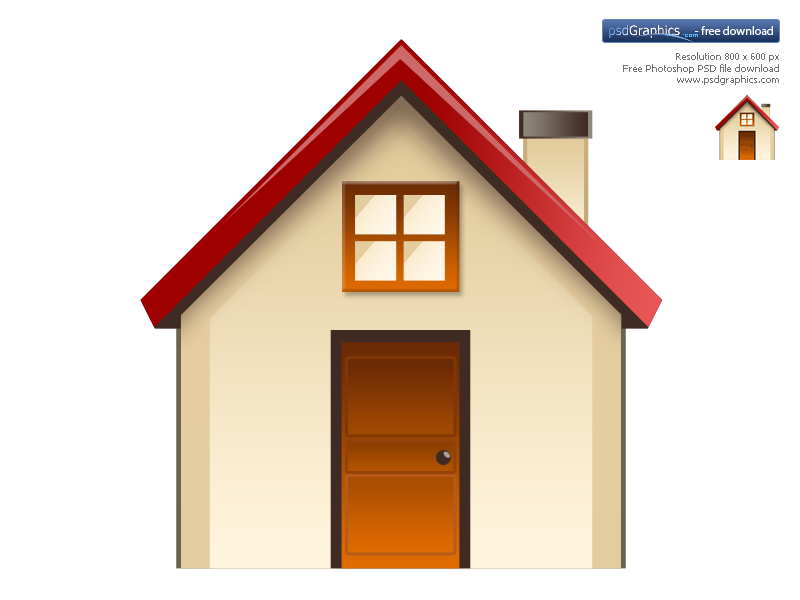
<style>
.page{position:relative;width:800px;height:600px;background:#ffffff}
.page>*{position:absolute;margin:0}
.t1{font:9.7px "Tahoma";color:#737373}
</style>
<div class="page">
<p class="t1" style="left:623px;top:52px;width:156px;height:33px;text-align:right">Resolution 800 x 600 px<br>Free Photoshop PSD file download<br>www.psdgraphics.com</p>
</div>
